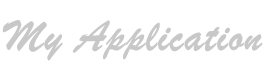
<style>
.page{position:relative;width:280px;height:70px;background:#ffffff}
.page>*{position:absolute;margin:0}
.t1{font:46px "BrushScriptMT";color:#c8c8c8;font-weight:bold}
</style>
<div class="page">
<p class="t1" style="left:2px;top:20px;width:261px;height:41px">My Application</p>
</div>
